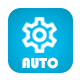
<style>
.page{position:relative;width:80px;height:80px;background:#ffffff}
.page>*{position:absolute;margin:0}
.t1{font:15px "Bauhaus93";color:#ffffff}
</style>
<div class="page">
<p class="t1" style="left:22px;top:57px;width:36px;height:12px">AUTO</p>
</div>
